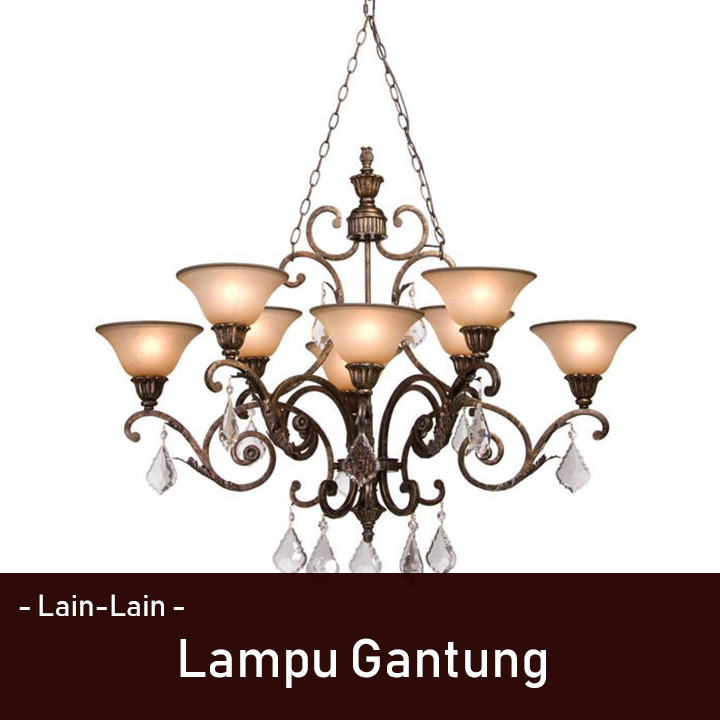
<style>
.page{position:relative;width:720px;height:720px;background:#ffffff}
.page>*{position:absolute;margin:0}
.t1{font:30px "Bahnschrift";color:#ffffff}
.t2{font:53.6px "Bahnschrift";color:#ffffff}
</style>
<div class="page">
<p class="t1" style="left:19px;top:594px;width:165px;height:22px">- Lain-Lain -</p>
<p class="t2" style="left:180px;top:638px;width:366px;height:50px">Lampu Gantung</p>
</div>
